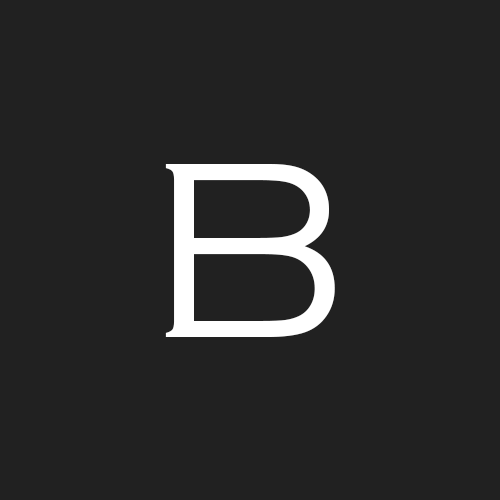
<style>
.page{position:relative;width:500px;height:500px;background:#212121}
.page>*{position:absolute;margin:0}
.t1{font:258.5px "CopperplateGothic-Light";color:#ffffff}
</style>
<div class="page">
<p class="t1" style="left:165px;top:164px;width:170px;height:173px">B</p>
</div>
